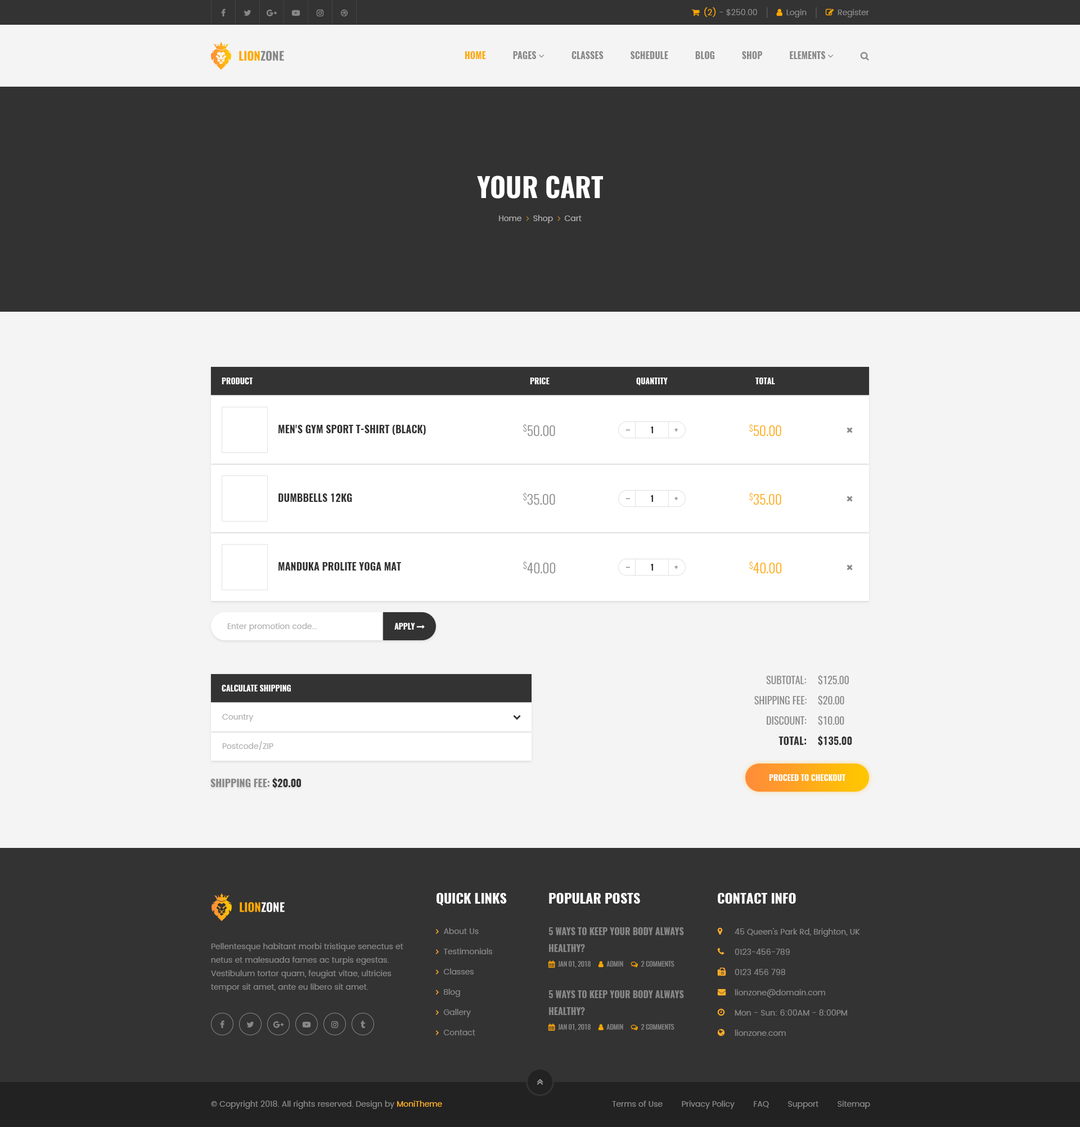
<style>
.page{position:relative;width:1080px;height:1127px;background:#f4f4f4}
.page>*{position:absolute;margin:0}
.t1{font:27px "Oswald-Bold";color:#ffffff;text-transform:uppercase}
.t2{font:7.9px "Oswald-Bold";color:#ffffff;text-transform:uppercase}
.t3{font:10.1px "Oswald-Bold";color:#333333;text-transform:uppercase}
.t4{font:13.5px "Oswald-Light";color:#888888;text-transform:uppercase}
.t5{font:13.5px "Oswald-Light";color:#ffa901;text-transform:uppercase}
.t6{font:7.9px "Oswald-Bold";color:#888888;text-transform:uppercase}
.t7{font:7.9px "Oswald-Bold";color:#333333;text-transform:uppercase}
.t8{font:7.9px "Poppins-Regular";color:#aeaeae}
.t9{font:10.1px/20.2px "Oswald-Regular";color:#888888;text-transform:uppercase}
.t10{font:10.1px/20.2px "Oswald-Bold";color:#333333;text-transform:uppercase}
.t11{font:10.1px "Oswald-Bold";color:#888888;text-transform:uppercase}
.t12{font:13.5px "Oswald-Bold";color:#ffffff;text-transform:uppercase}
.t13{font:7.9px/20.2px "Poppins-Regular";color:#888888}
.t14{font:7.9px/13.5px "Poppins-Regular";color:#888888}
.t15{font:7.9px "Poppins-Regular";color:#888888}
.t16{font:7.9px "Poppins-Regular";color:#ffb027}
</style>
<div class="page">
<p class="t1" style="left:477px;top:176px;width:126px;height:23px">your cart</p>
<p class="t2" style="left:222px;top:377px;width:31px;height:7px">product</p>
<p class="t2" style="left:530px;top:377px;width:20px;height:7px">price</p>
<p class="t2" style="left:636px;top:377px;width:32px;height:9px">quantity</p>
<p class="t2" style="left:755px;top:377px;width:20px;height:7px">total</p>
<p class="t3" style="left:278px;top:425px;width:148px;height:10px">Men's Gym Sport T-Shirt (black)</p>
<p class="t4" style="left:523px;top:424px;width:32px;height:12px">$50.00</p>
<p class="t5" style="left:749px;top:424px;width:32px;height:12px">$50.00</p>
<p class="t6" style="left:626px;top:426px;width:52px;height:7px">–          <span class="t7">1</span>          +</p>
<p class="t3" style="left:278px;top:493px;width:74px;height:9px">Dumbbells 12kg</p>
<p class="t4" style="left:523px;top:492px;width:32px;height:13px">$35.00</p>
<p class="t6" style="left:626px;top:495px;width:52px;height:7px">–          <span class="t7">1</span>          +</p>
<p class="t5" style="left:749px;top:492px;width:32px;height:13px">$35.00</p>
<p class="t3" style="left:278px;top:562px;width:123px;height:8px">Manduka PROlite yoga mat</p>
<p class="t4" style="left:523px;top:561px;width:33px;height:12px">$40.00</p>
<p class="t6" style="left:626px;top:564px;width:52px;height:6px">–          <span class="t7">1</span>          +</p>
<p class="t5" style="left:749px;top:561px;width:33px;height:12px">$40.00</p>
<p class="t8" style="left:227px;top:623px;width:90px;height:8px">Enter promotion code...</p>
<p class="t9" style="left:754px;top:676px;width:53px;height:69px;text-align:right">subtotal: <br>shipping fee:<br>discount: <br><span class="t10">total:</span></p>
<p class="t9" style="left:818px;top:674px;width:34px;height:72px">$125.00<br>$20.00<br>$10.00<br><span class="t10">$135.00</span></p>
<p class="t2" style="left:222px;top:685px;width:69px;height:6px">calculate shipping</p>
<p class="t8" style="left:222px;top:714px;width:32px;height:8px">Country</p>
<p class="t8" style="left:222px;top:741px;width:51px;height:9px">Postcode/ZIP</p>
<p class="t2" style="left:769px;top:774px;width:76px;height:7px">proceed to checkout</p>
<p class="t11" style="left:210px;top:777px;width:91px;height:11px">shipping fee:<span class="t3"> $20.00</span></p>
<p class="t12" style="left:436px;top:893px;width:71px;height:13px">quick links</p>
<p class="t12" style="left:549px;top:893px;width:91px;height:10px">popular posts</p>
<p class="t12" style="left:718px;top:893px;width:78px;height:10px">contact info</p>
<p class="t13" style="left:735px;top:928px;width:125px;height:108px">45 Queen's Park Rd, Brighton, UK<br>0123-456-789<br>0123 456 798<br>lionzone@domain.com<br>Mon - Sun: 6:00AM - 8:00PM<br>lionzone.com</p>
<p class="t14" style="left:211px;top:943px;width:192px;height:49px">Pellentesque habitant morbi tristique senectus et netus et malesuada fames ac turpis egestas. Vestibulum tortor quam, feugiat vitae, ultricies tempor sit amet, ante eu libero sit amet.</p>
<p class="t15" style="left:211px;top:1100px;width:231px;height:9px">© Copyright 2018. All rights reserved. Design by <span class="t16">MoniTheme</span></p>
<p class="t15" style="left:612px;top:1100px;width:258px;height:9px">Terms of Use        Privacy Policy        FAQ        Support        Sitemap</p>
</div>
